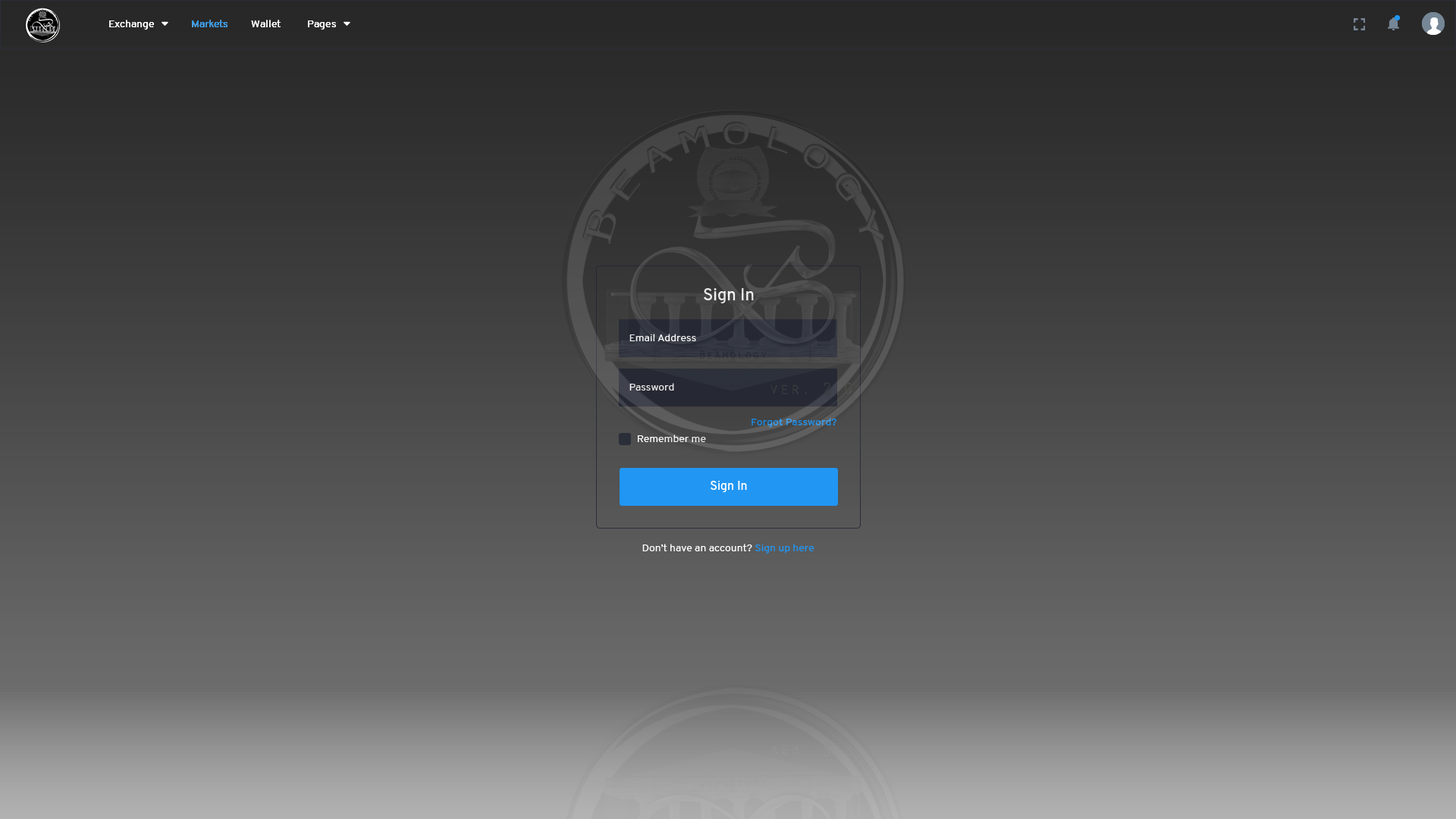
<style>
.page{position:relative;width:1456px;height:819px}
.page>*{position:absolute;margin:0}
.t1{font:16.7px "Overpass-SemiBold";color:#ffffff}
.t2{font:10.6px "Overpass-Regular";color:#ffffff}
.t3{font:10.6px "Overpass-Regular";color:#e5e5e5}
.t4{font:10.6px "Overpass-SemiBold";color:#2196f3}
.t5{font:10.6px "Overpass-Regular";color:#fefeff}
.t6{font:12.1px "Overpass-SemiBold";color:#ffffff}
.t7{font:10.6px "Overpass-Regular";color:#2196f3}
</style>
<div class="page">
<p class="t1" style="left:704px;top:288px;width:50px;height:16px">Sign In</p>
<p class="t2" style="left:629px;top:334px;width:67px;height:7px">Email Address</p>
<p class="t3" style="left:629px;top:383px;width:45px;height:8px">Password</p>
<p class="t4" style="left:751px;top:418px;width:86px;height:10px">Forgot Password?</p>
<p class="t5" style="left:638px;top:435px;width:68px;height:7px">Remember me</p>
<p class="t6" style="left:711px;top:481px;width:36px;height:12px">Sign In</p>
<p class="t2" style="left:642px;top:544px;width:172px;height:10px">Don’t have an account? <span class="t7">Sign up here</span></p>
</div>
